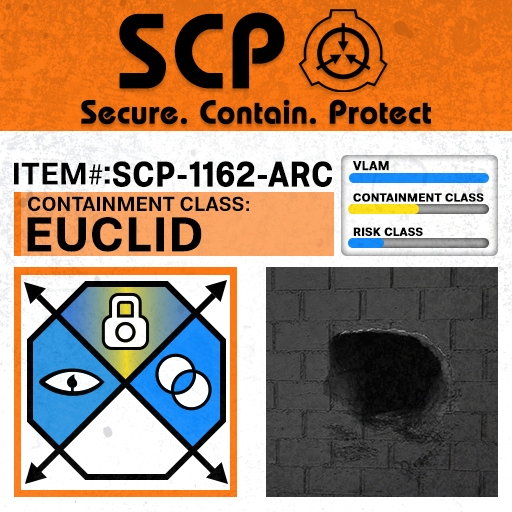
<style>
.page{position:relative;width:512px;height:512px}
.page>*{position:absolute;margin:0}
.t1{font:105.8px "BauhausLT-Demi";color:#000000;font-weight:bold}
.t2{font:33px "BauhausLT-Demi";color:#000000;font-weight:bold}
.t3{font:35.1px "Molde-Semibold";color:#000000;font-weight:bold;scale:0.88 1}
.t4{font:12.5px "Molde-Semibold";color:#000000;font-weight:bold}
.t5{font:31.1px "Molde-Semibold";color:#000000}
.t6{font:31.1px "MyriadPro-Regular";color:#000000}
.t7{font:34.5px "Molde-Semibold";color:#000000}
.t8{font:20.3px "Molde-Semibold";color:#000000}
.t9{font:11.7px "Molde-Semibold";color:#000000;font-weight:bold}
.t10{font:47.8px "Molde-Semibold";color:#000000;font-weight:bold}
</style>
<div class="page">
<p class="t1" style="left:119px;top:12px;width:166px;height:77px">SCP</p>
<p class="t2" style="left:81px;top:99px;width:350px;height:26px">Secure. Contain. Protect</p>
<p class="t3" style="left:113px;top:161px;width:219px;height:26px">SCP-1162-ARC</p>
<p class="t4" style="left:353px;top:161px;width:36px;height:10px">VLAM</p>
<p class="t5" style="left:14px;top:162px;width:89px;height:23px">ITEM<span class="t6">#</span></p>
<p class="t7" style="left:104px;top:166px;width:6px;height:18px">:</p>
<p class="t8" style="left:28px;top:196px;width:221px;height:16px">CONTAINMENT CLASS:</p>
<p class="t9" style="left:353px;top:193px;width:131px;height:9px">CONTAINMENT CLASS</p>
<p class="t10" style="left:27px;top:217px;width:175px;height:35px">EUCLID</p>
<p class="t9" style="left:353px;top:227px;width:70px;height:9px">RISK CLASS</p>
</div>
